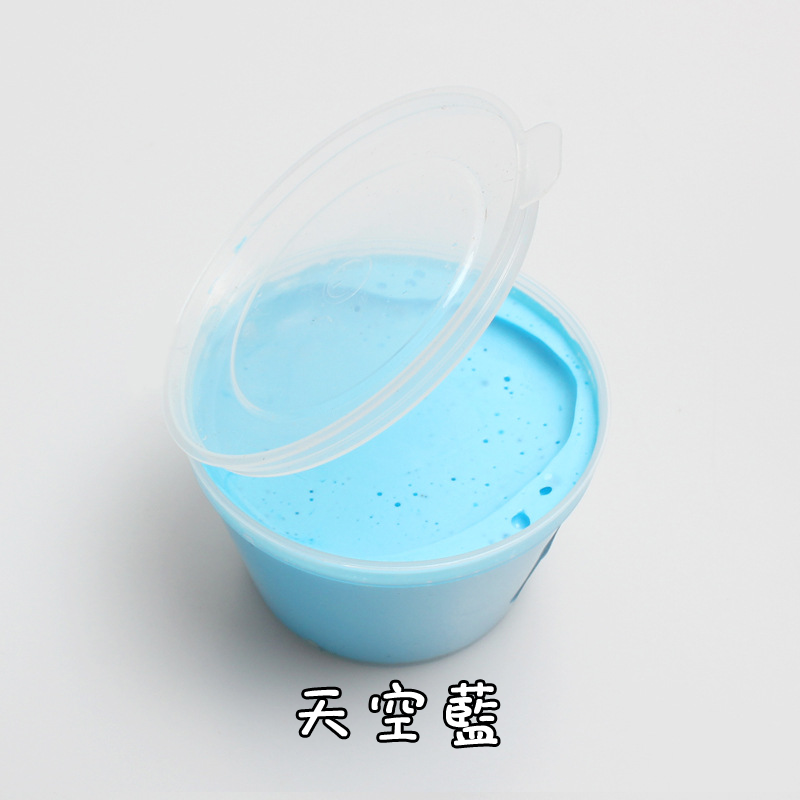
<style>
.page{position:relative;width:800px;height:800px}
.page>*{position:absolute;margin:0}
.t1{font:72px "DFPao-W4-WINP-BF";color:#ffffff;font-weight:bold}
</style>
<div class="page">
<p class="t1" style="left:298px;top:682px;width:200px;height:64px">天空藍</p>
</div>
